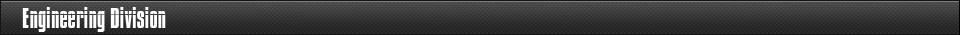
<style>
.page{position:relative;width:960px;height:35px}
.page>*{position:absolute;margin:0}
.t1{font:25px "Impossible";color:#ffffff}
</style>
<div class="page">
<p class="t1" style="left:22px;top:7px;width:144px;height:25px">Engineering Division</p>
</div>
